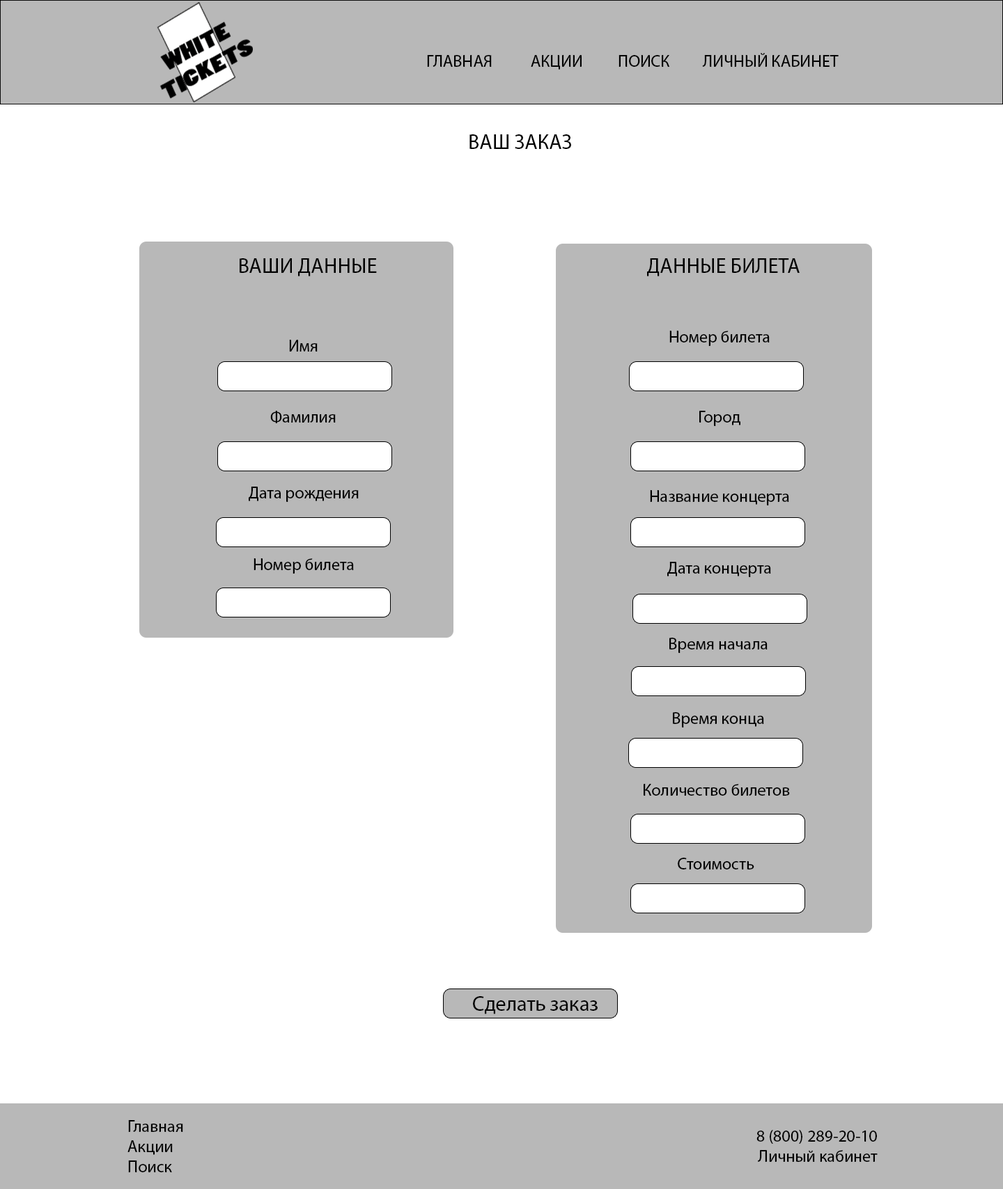
<style>
.page{position:relative;width:1003px;height:1189px;background:#ffffff}
.page>*{position:absolute;margin:0}
.t1{font:16.7px "MyriadPro-Regular";color:#000000}
.t2{font:20.9px "MyriadPro-Regular";color:#000000}
</style>
<div class="page">
<p class="t1" style="left:702px;top:53px;width:136px;height:14px">ЛИЧНЫЙ КАБИНЕТ</p>
<p class="t1" style="left:427px;top:55px;width:65px;height:12px">ГЛАВНАЯ</p>
<p class="t1" style="left:531px;top:55px;width:50px;height:15px">АКЦИИ</p>
<p class="t1" style="left:618px;top:55px;width:52px;height:12px">ПОИСК</p>
<p class="t2" style="left:469px;top:134px;width:102px;height:15px">ВАШ ЗАКАЗ</p>
<p class="t2" style="left:240px;top:258px;width:137px;height:18px">ВАШИ ДАННЫЕ</p>
<p class="t2" style="left:647px;top:258px;width:152px;height:18px">ДАННЫЕ БИЛЕТА</p>
<p class="t1" style="left:289px;top:340px;width:29px;height:12px">Имя</p>
<p class="t1" style="left:669px;top:331px;width:100px;height:15px">Номер билета</p>
<p class="t1" style="left:270px;top:411px;width:66px;height:12px">Фамилия</p>
<p class="t1" style="left:699px;top:411px;width:41px;height:15px">Город</p>
<p class="t1" style="left:249px;top:487px;width:110px;height:15px">Дата рождения</p>
<p class="t1" style="left:650px;top:490px;width:139px;height:16px">Название концерта</p>
<p class="t1" style="left:253px;top:558px;width:101px;height:16px">Номер билета</p>
<p class="t1" style="left:667px;top:562px;width:104px;height:15px">Дата концерта</p>
<p class="t1" style="left:669px;top:638px;width:98px;height:15px">Время начала</p>
<p class="t1" style="left:673px;top:712px;width:91px;height:16px">Время конца</p>
<p class="t1" style="left:643px;top:784px;width:147px;height:12px">Количество билетов</p>
<p class="t1" style="left:677px;top:858px;width:77px;height:12px">Стоимость</p>
<p class="t2" style="left:473px;top:996px;width:124px;height:18px">Сделать заказ</p>
<p class="t1" style="left:127px;top:1120px;width:56px;height:53px">Главная<br>Акции<br>Поиск</p>
<p class="t1" style="left:756px;top:1130px;width:121px;height:32px;text-align:right">8 (800) 289-20-10<br>Личный кабинет</p>
</div>
